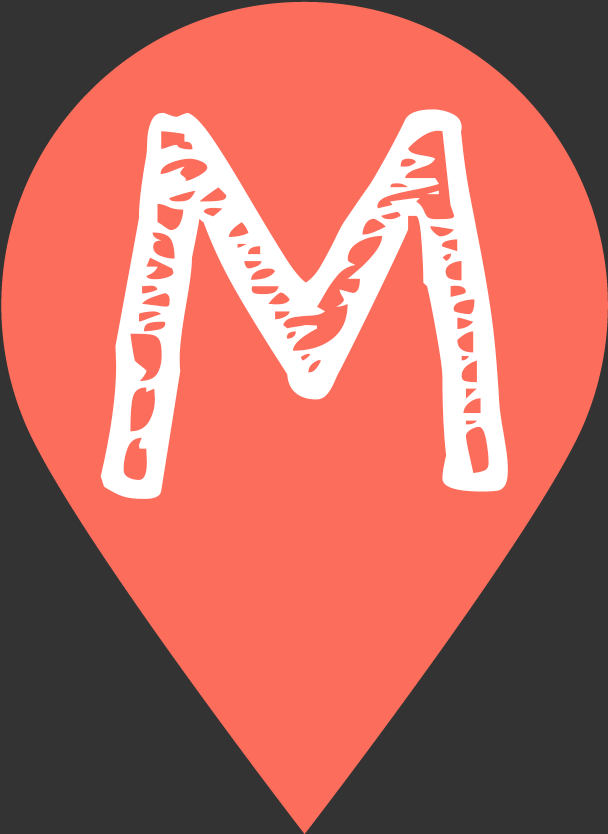
<style>
.page{position:relative;width:608px;height:834px;background:#fd6d5b}
.page>*{position:absolute;margin:0}
.t1{font:571.8px "CabinSketch-Regular";color:#ffffff;scale:1.08 1}
</style>
<div class="page">
<p class="t1" style="left:100px;top:109px;width:408px;height:390px">M</p>
</div>
